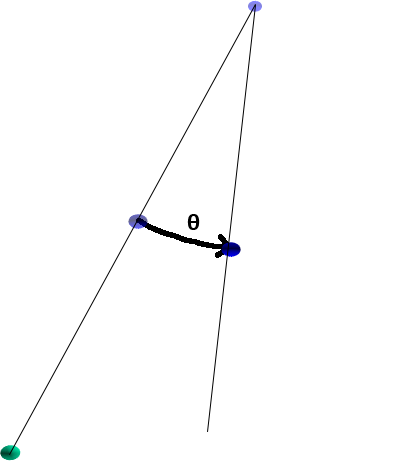
<style>
.page{position:relative;width:398px;height:461px;background:#ffffff}
.page>*{position:absolute;margin:0}
.t1{font:24px "Calibri-Bold";color:#000000}
</style>
<div class="page">
<p class="t1" style="left:187px;top:214px;width:13px;height:16px">θ</p>
</div>
